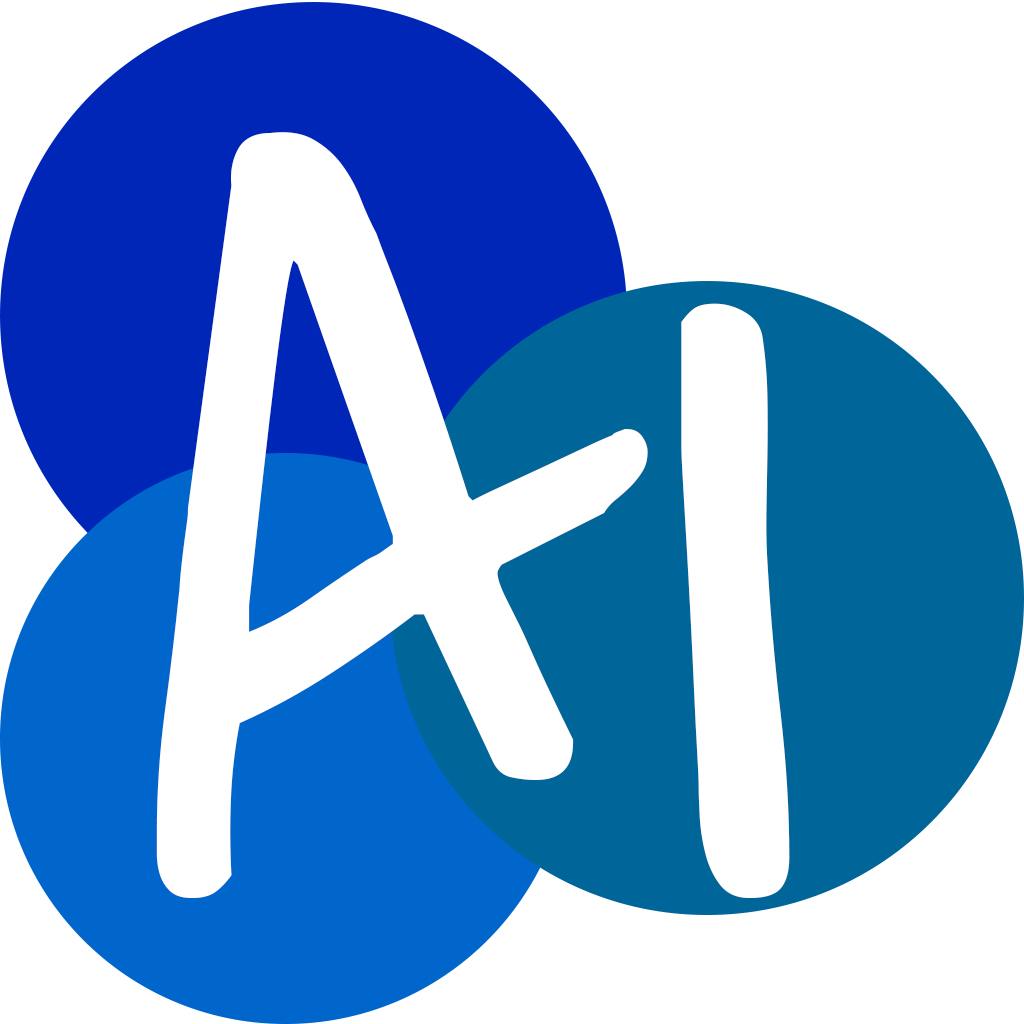
<style>
.page{position:relative;width:1024px;height:1024px;background:#ffffff}
.page>*{position:absolute;margin:0}
.t1{font:1060.5px "CoveredByYourGrace";color:#ffffff}
.t2{font:1041.7px "CoveredByYourGrace";color:#ffffff}
</style>
<div class="page">
<p class="t1" style="left:156px;top:132px;width:634px;height:766px">A<span class="t2">I</span></p>
</div>
